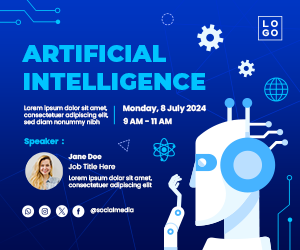
<style>
.page{position:relative;width:300px;height:250px}
.page>*{position:absolute;margin:0}
.t1{font:23.7px "Montserrat-Black";color:#00c4ff}
.t2{font:6px "Poppins-Regular";color:#ffffff}
.t3{font:8px "Poppins-Bold";color:#ffffff}
.t4{font:8px "Poppins-Bold";color:#00c4ff}
.t5{font:7px "Poppins-Bold";color:#ffffff}
.t6{font:7px "Poppins-Regular";color:#ffffff}
</style>
<div class="page">
<p class="t1" style="left:22px;top:45px;width:184px;height:45px">ARTIFICIAL<br>INTELLIGENCE</p>
<p class="t2" style="left:24px;top:105px;width:85px;height:21px">Lorem ipsum dolor sit amet,<br>consectetuer adipiscing elit,<br>sed diam nonummy nibh</p>
<p class="t3" style="left:123px;top:104px;width:83px;height:10px">Monday, 8 July 2024</p>
<p class="t3" style="left:123px;top:117px;width:49px;height:8px">9 AM - 11 AM</p>
<p class="t4" style="left:24px;top:137px;width:40px;height:10px">Speaker  :</p>
<p class="t5" style="left:68px;top:153px;width:34px;height:7px">Jane Doe</p>
<p class="t6" style="left:68px;top:163px;width:48px;height:7px">Job Title Here</p>
<p class="t2" style="left:68px;top:175px;width:84px;height:14px">Lorem ipsum dolor sit amet,<br>consectetuer adipiscing elit</p>
<p class="t2" style="left:90px;top:207px;width:44px;height:7px">@socialmedia</p>
</div>
